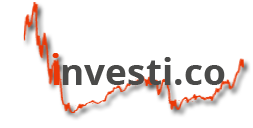
<style>
.page{position:relative;width:253px;height:128px;background:#ffffff}
.page>*{position:absolute;margin:0}
.t1{font:37px "OpenSans-Bold";color:#4a4a49}
</style>
<div class="page">
<p class="t1" style="left:62px;top:57px;width:163px;height:28px">nvesti.co</p>
</div>
